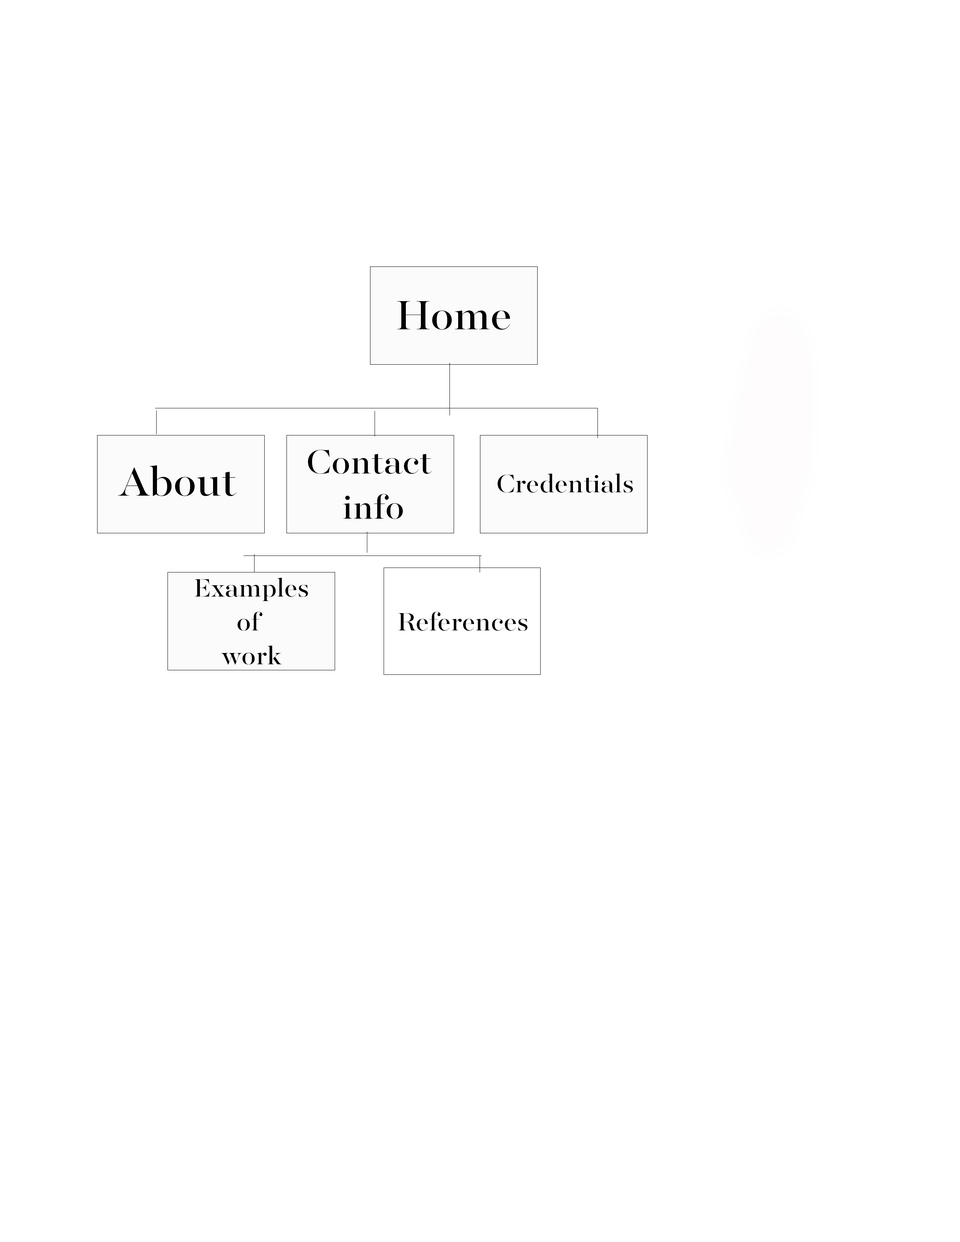
<style>
.page{position:relative;width:960px;height:1242px;background:#ffffff}
.page>*{position:absolute;margin:0}
.t1{font:45.5px "MajestiBanner-Book";color:#000000}
.t2{font:37.6px "MajestiBanner-Book";color:#000000}
.t3{font:28.2px "MajestiBanner-Book";color:#000000}
</style>
<div class="page">
<p class="t1" style="left:397px;top:301px;width:113px;height:29px">Home</p>
<p class="t2" style="left:308px;top:450px;width:124px;height:69px;text-align:center">Contact <br>info</p>
<p class="t1" style="left:118px;top:465px;width:119px;height:31px">About</p>
<p class="t3" style="left:497px;top:473px;width:136px;height:20px">Credentials</p>
<p class="t3" style="left:194px;top:577px;width:114px;height:88px;text-align:center">Examples<br>of <br>work</p>
<p class="t3" style="left:398px;top:612px;width:129px;height:19px">References</p>
</div>
